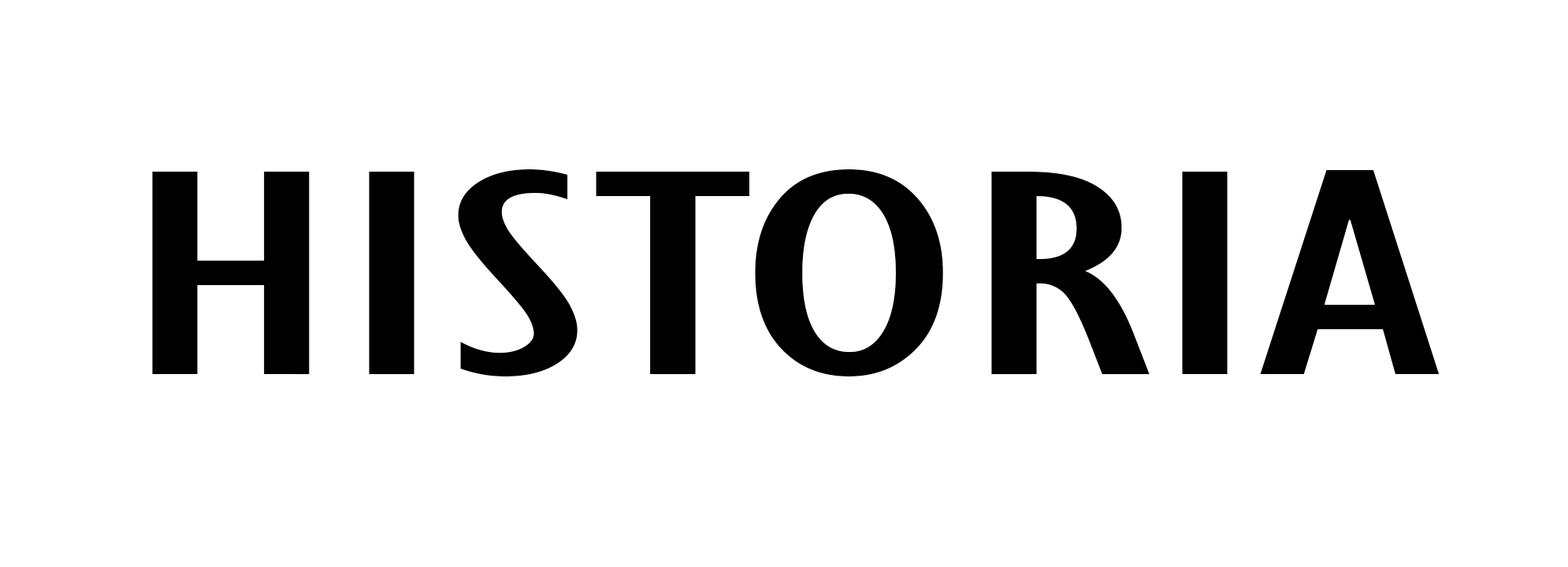
<style>
.page{position:relative;width:1568px;height:567px;background:#ffffff}
.page>*{position:absolute;margin:0}
.t1{font:303.3px "GillSansMT-Condensed";color:#000000;scale:1.73 1}
</style>
<div class="page">
<p class="t1" style="left:152px;top:169px;width:1288px;height:208px">HISTORIA</p>
</div>
